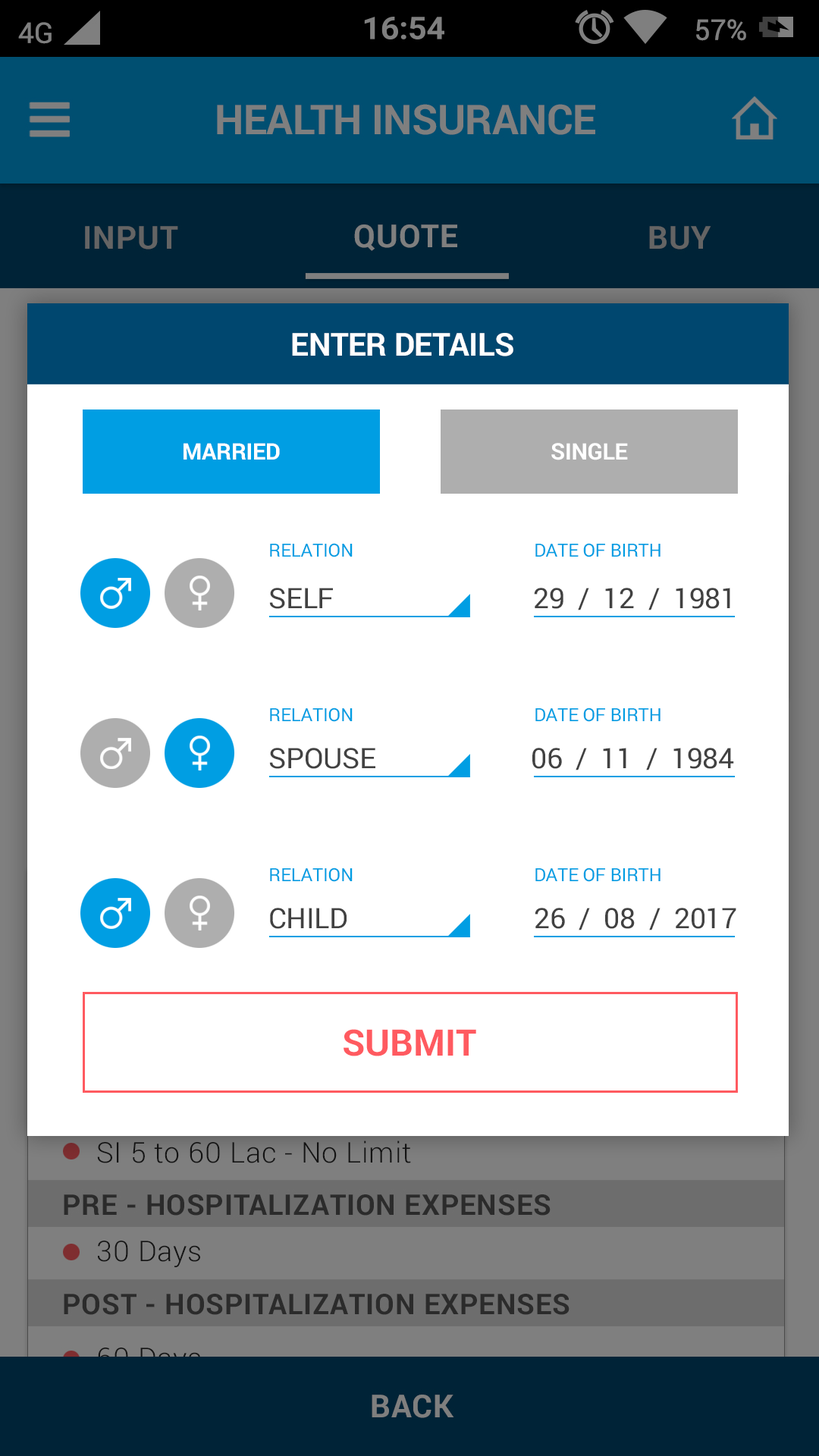
<style>
.page{position:relative;width:819px;height:1456px;background:#ffffff}
.page>*{position:absolute;margin:0}
.t1{font:31.6px "Roboto-Bold";letter-spacing:-0.01em;color:#ffffff}
.t2{font:22.7px "Roboto-Bold";letter-spacing:-0.01em;color:#ffffff}
.t3{font:18.2px "Roboto-Regular";letter-spacing:-0.01em;color:#009ee3}
.t4{font:28.2px "Roboto-Regular";letter-spacing:-0.01em;color:#414141}
.t5{font:36.4px "Roboto-Bold";color:#ff5a60}
</style>
<div class="page">
<p class="t1" style="left:292px;top:333px;width:221px;height:23px">ENTER DETAILS</p>
<p class="t2" style="left:184px;top:443px;width:96px;height:17px">MARRIED</p>
<p class="t2" style="left:551px;top:443px;width:77px;height:17px">SINGLE</p>
<p class="t3" style="left:270px;top:543px;width:83px;height:14px">RELATION</p>
<p class="t3" style="left:535px;top:543px;width:125px;height:14px">DATE OF BIRTH</p>
<p class="t4" style="left:269px;top:588px;width:64px;height:21px">SELF</p>
<p class="t4" style="left:534px;top:588px;width:196px;height:22px">29  /  12  /  1981</p>
<p class="t3" style="left:270px;top:708px;width:83px;height:14px">RELATION</p>
<p class="t3" style="left:535px;top:708px;width:125px;height:14px">DATE OF BIRTH</p>
<p class="t4" style="left:269px;top:748px;width:106px;height:21px">SPOUSE</p>
<p class="t4" style="left:532px;top:748px;width:202px;height:22px">06  /  11  /  1984</p>
<p class="t3" style="left:270px;top:868px;width:83px;height:14px">RELATION</p>
<p class="t3" style="left:535px;top:868px;width:125px;height:14px">DATE OF BIRTH</p>
<p class="t4" style="left:270px;top:908px;width:77px;height:21px">CHILD</p>
<p class="t4" style="left:535px;top:908px;width:201px;height:22px">26  /  08  /  2017</p>
<p class="t5" style="left:344px;top:1029px;width:132px;height:27px">SUBMIT</p>
</div>
